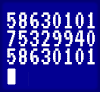
<style>
.page{position:relative;width:100px;height:92px;background:#030092}
.page>*{position:absolute;margin:0}
.t1{font:27px/18px "VT323-Regular";letter-spacing:0.005em;color:#ffffff}
</style>
<div class="page">
<p class="t1" style="left:7px;top:12px;width:88px;height:53px">58630101<br>75329940<br>58630101</p>
</div>
